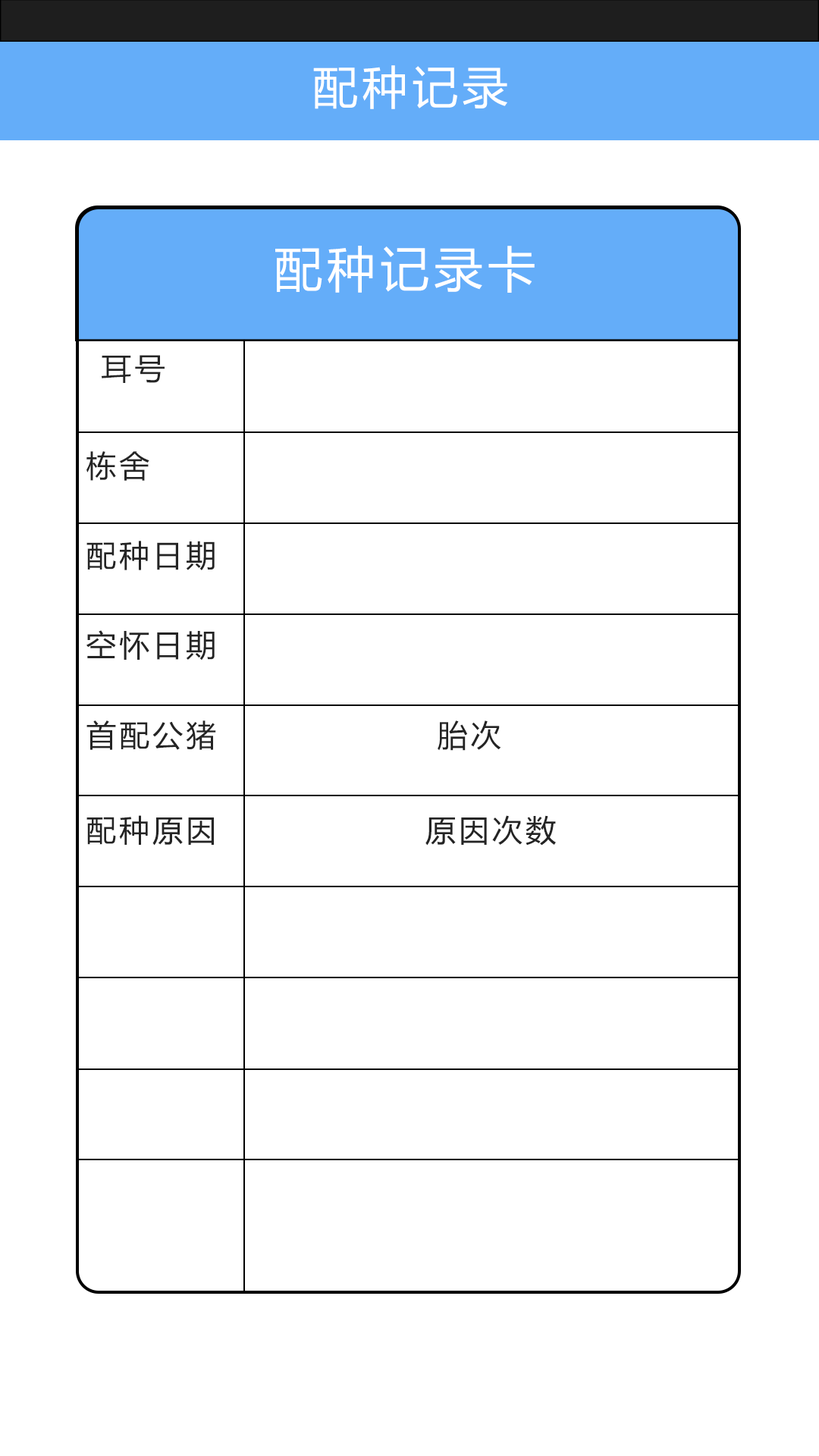
<style>
.page{position:relative;width:819px;height:1456px;background:#ffffff}
.page>*{position:absolute;margin:0}
.t1{font:45.5px "MicrosoftYaHei";letter-spacing:0.1em;color:#ffffff}
.t2{font:48.5px "MicrosoftYaHei";letter-spacing:0.1em;color:#ffffff}
.t3{font:30.3px "MicrosoftYaHei";letter-spacing:0.1em;color:#242424}
</style>
<div class="page">
<p class="t1" style="left:313px;top:65px;width:194px;height:44px">配种记录</p>
<p class="t2" style="left:275px;top:246px;width:260px;height:47px">配种记录卡</p>
<p class="t3" style="left:102px;top:355px;width:63px;height:28px">耳号</p>
<p class="t3" style="left:86px;top:451px;width:63px;height:30px">栋舍</p>
<p class="t3" style="left:86px;top:541px;width:129px;height:29px">配种日期</p>
<p class="t3" style="left:86px;top:630px;width:129px;height:30px">空怀日期</p>
<p class="t3" style="left:86px;top:720px;width:130px;height:30px">首配公猪</p>
<p class="t3" style="left:438px;top:720px;width:63px;height:31px">胎次</p>
<p class="t3" style="left:86px;top:815px;width:128px;height:31px">配种原因</p>
<p class="t3" style="left:425px;top:815px;width:131px;height:31px">原因次数</p>
</div>
